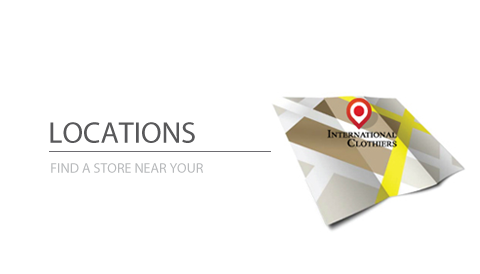
<style>
.page{position:relative;width:480px;height:274px;background:#ffffff}
.page>*{position:absolute;margin:0}
.t1{font:30px "MyriadPro-Regular";color:#58585a}
.t2{font:14px "MyriadPro-Regular";color:#b7b9bb}
</style>
<div class="page">
<p class="t1" style="left:50px;top:122px;width:145px;height:21px">LOCATIONS</p>
<p class="t2" style="left:51px;top:163px;width:152px;height:10px">FIND A STORE NEAR YOUR</p>
</div>
